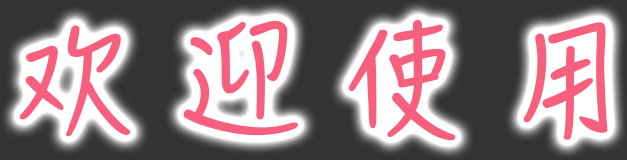
<style>
.page{position:relative;width:627px;height:160px;background:#333333}
.page>*{position:absolute;margin:0}
.t1{font:120px "HanziPenSC-W5";color:#f75f7f}
</style>
<div class="page">
<p class="t1" style="left:19px;top:19px;width:589px;height:122px">欢 迎 使 用</p>
</div>
